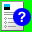
<style>
.page{position:relative;width:32px;height:32px}
.page>*{position:absolute;margin:0}
.t1{font:14px "Arial-BoldMT";color:#ffffff}
</style>
<div class="page">
<p class="t1" style="left:18px;top:11px;width:8px;height:11px">?</p>
</div>
